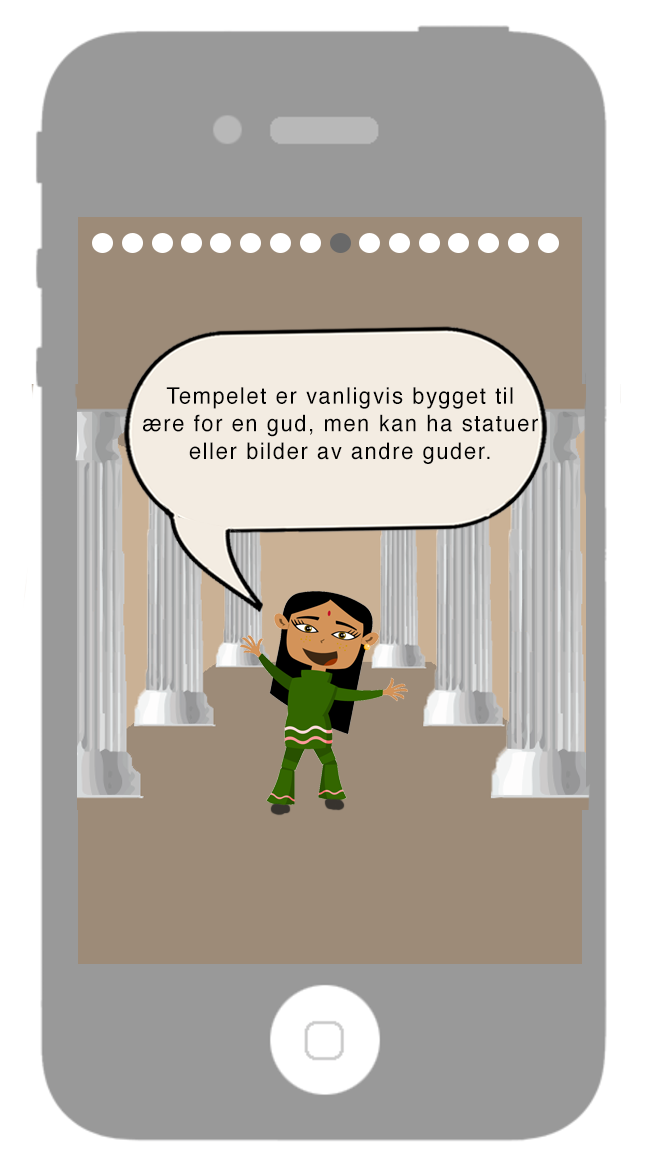
<style>
.page{position:relative;width:646px;height:1172px;background:#999999}
.page>*{position:absolute;margin:0}
.t1{font:11px "Helvetica";letter-spacing:0.075em;color:#010101;scale:0.95 1}
</style>
<div class="page">
<p class="t1" style="left:143px;top:387px;width:395px;height:77px;text-align:center">Tempelet er vanligvis bygget til<br>ære for en gud, men kan ha statuer<br>eller bilder av andre guder.</p>
</div>
